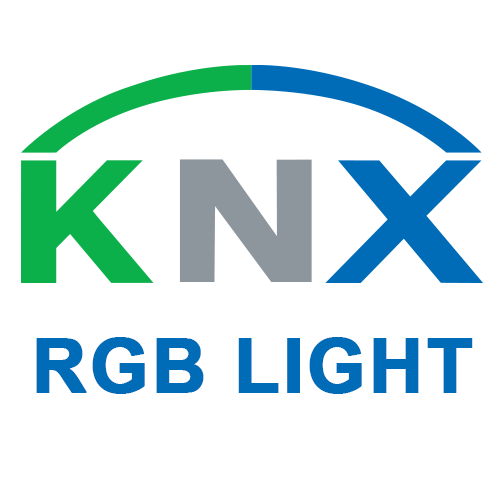
<style>
.page{position:relative;width:500px;height:500px;background:#ffffff}
.page>*{position:absolute;margin:0}
.t1{font:75px "Arial-BoldMT";letter-spacing:0.02em;color:#006bb6;text-transform:uppercase;font-weight:bold}
</style>
<div class="page">
<p class="t1" style="left:36px;top:337px;width:437px;height:57px">RGB Light</p>
</div>
